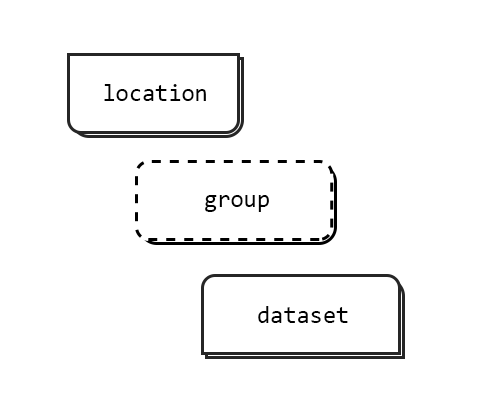
<style>
.page{position:relative;width:477px;height:416px;background:#ffffff}
.page>*{position:absolute;margin:0}
.t1{font:24px "Consolas";color:#010101}
</style>
<div class="page">
<p class="t1" style="left:104px;top:84px;width:102px;height:17px">location</p>
<p class="t1" style="left:205px;top:195px;width:64px;height:17px">group</p>
<p class="t1" style="left:258px;top:306px;width:90px;height:17px">dataset</p>
</div>
